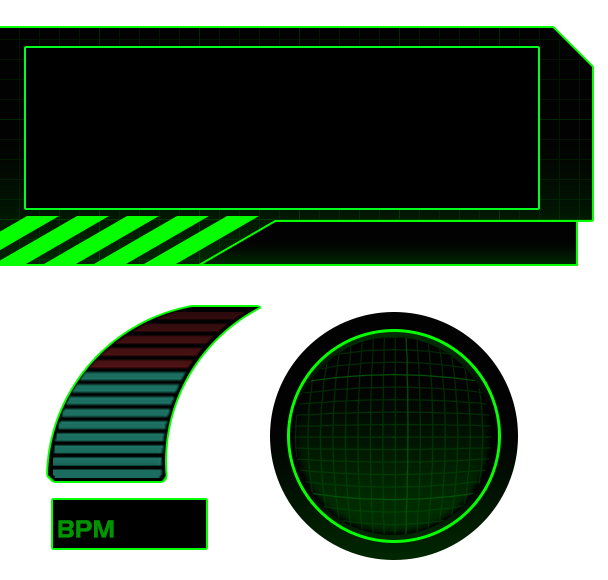
<style>
.page{position:relative;width:608px;height:580px;background:#ffffff}
.page>*{position:absolute;margin:0}
.t1{font:23.7px "HandelGothicBT-Regular";color:#009500}
</style>
<div class="page">
<p class="t1" style="left:58px;top:520px;width:56px;height:18px">BPM</p>
</div>
